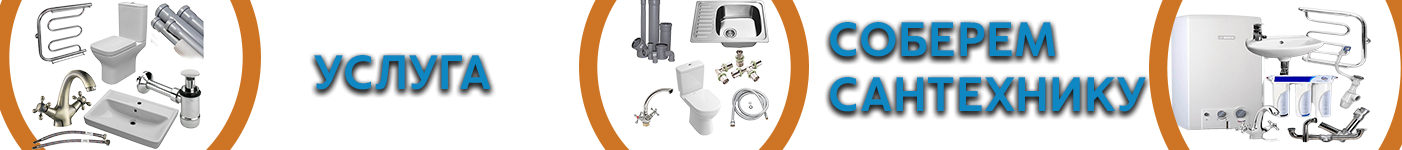
<style>
.page{position:relative;width:1402px;height:150px;background:#ffffff}
.page>*{position:absolute;margin:0}
.t1{font:45.8px "CapturaNow-Medium";color:#0f87c3;text-transform:uppercase}
</style>
<div class="page">
<p class="t1" style="left:830px;top:22px;width:316px;height:90px">СОБЕРЕМ<br>САНТЕХНИКУ</p>
<p class="t1" style="left:314px;top:55px;width:177px;height:35px">уСЛУГА</p>
</div>
